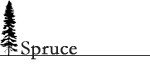
<style>
.page{position:relative;width:150px;height:70px;background:#ffffff}
.page>*{position:absolute;margin:0}
.t1{font:20px "Garamond";color:#222222;font-weight:bold}
</style>
<div class="page">
<p class="t1" style="left:21px;top:41px;width:56px;height:19px">Spruce</p>
</div>
